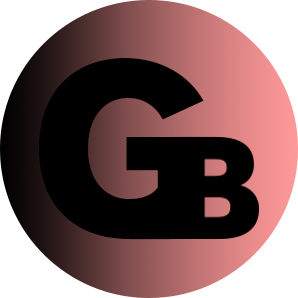
<style>
.page{position:relative;width:298px;height:298px;background:#000000}
.page>*{position:absolute;margin:0}
.t1{font:250px "CoreSansA75ExtraBold";color:#000000}
</style>
<div class="page">
<p class="t1" style="left:39px;top:58px;width:165px;height:181px">G</p>
</div>
